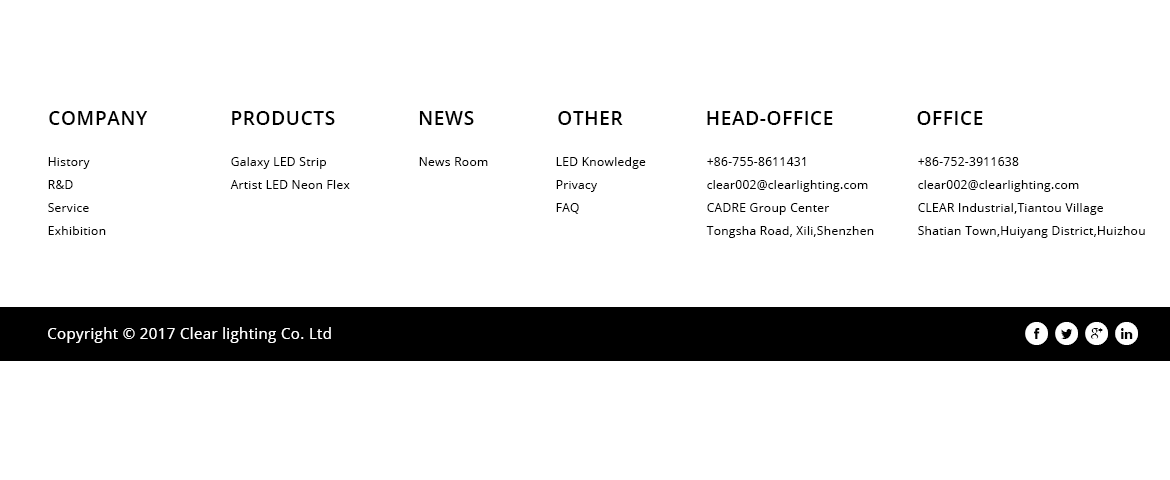
<style>
.page{position:relative;width:1170px;height:480px;background:#ffffff}
.page>*{position:absolute;margin:0}
.t1{font:19.3px "OpenSans-Semibold";letter-spacing:0.025em;color:#000000}
.t2{font:12px/23px "OpenSans";letter-spacing:0.025em;color:#000000}
.t3{font:12px "OpenSans";letter-spacing:0.025em;color:#000000}
.t4{font:15px "OpenSans";letter-spacing:0.025em;color:#ffffff}
.t5{font:35px "socialtype";letter-spacing:0.025em;color:#ffffff}
</style>
<div class="page">
<p class="t1" style="left:49px;top:111px;width:934px;height:14px">COMPANY               PRODUCTS               NEWS               OTHER               HEAD-OFFICE               OFFICE</p>
<p class="t2" style="left:48px;top:157px;width:58px;height:78px;text-align:right">History<br>R&amp;D<br>Service<br>Exhibition</p>
<p class="t2" style="left:230px;top:157px;width:120px;height:32px;text-align:right">Galaxy LED Strip<br>Artist LED Neon Flex</p>
<p class="t3" style="left:419px;top:157px;width:69px;height:9px">News Room</p>
<p class="t2" style="left:556px;top:157px;width:90px;height:57px;text-align:right">LED Knowledge<br>Privacy<br>FAQ</p>
<p class="t2" style="left:706px;top:157px;width:168px;height:81px;text-align:right">+86-755-8611431<br>clear002@clearlighting.com<br>CADRE Group Center<br>Tongsha Road, Xili,Shenzhen</p>
<p class="t2" style="left:918px;top:157px;width:227px;height:81px;text-align:right">+86-752-3911638<br>clear002@clearlighting.com<br>CLEAR Industrial,Tiantou Village<br>Shatian Town,Huiyang District,Huizhou</p>
<p class="t4" style="left:48px;top:327px;width:283px;height:16px">Copyright © 2017 Clear lighting Co. Ltd</p>
<p class="t5" style="left:1025px;top:322px;width:113px;height:23px">BACD</p>
</div>
